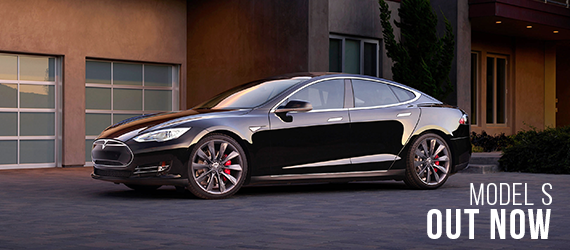
<style>
.page{position:relative;width:570px;height:250px}
.page>*{position:absolute;margin:0}
.t1{font:30.6px "BebasNeueBook";letter-spacing:0.04em;color:#ffffff}
.t2{font:42.7px "BebasNeueBold";letter-spacing:0.04em;color:#ffffff}
</style>
<div class="page">
<p class="t1" style="left:470px;top:183px;width:82px;height:23px">Model s</p>
<p class="t2" style="left:427px;top:209px;width:124px;height:30px">Out now</p>
</div>
